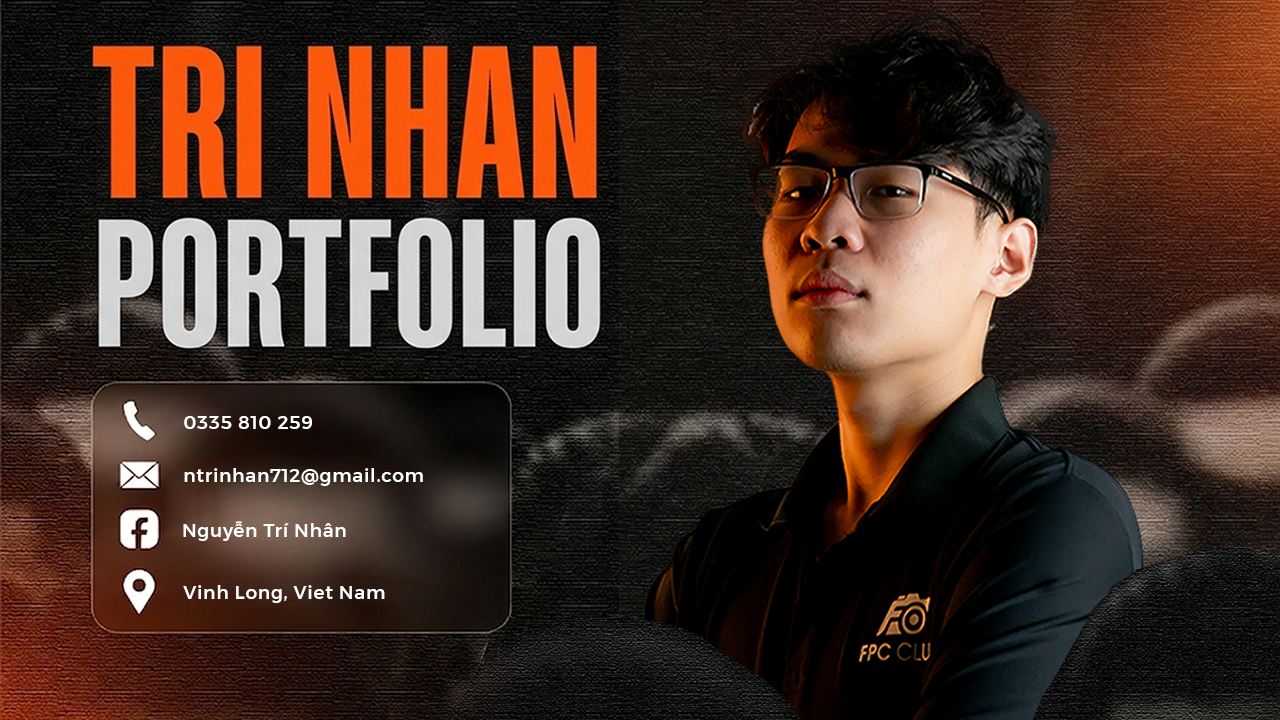
<style>
.page{position:relative;width:1280px;height:720px}
.page>*{position:absolute;margin:0}
.t1{font:18.7px "#9Slide03MontserratMedium";letter-spacing:0.036em;color:#ffffff}
</style>
<div class="page">
<p class="t1" style="left:184px;top:416px;width:128px;height:13px">0335 810 259</p>
<p class="t1" style="left:184px;top:468px;width:239px;height:18px">ntrinhan712@gmail.com</p>
<p class="t1" style="left:183px;top:521px;width:163px;height:20px">Nguyễn Trí Nhân</p>
<p class="t1" style="left:183px;top:585px;width:202px;height:18px">Vinh Long, Viet Nam</p>
</div>
